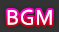
<style>
.page{position:relative;width:59px;height:32px;background:#333333}
.page>*{position:absolute;margin:0}
.t1{font:22px "Corbel";letter-spacing:0.035em;color:#ffffff}
</style>
<div class="page">
<p class="t1" style="left:7px;top:9px;width:45px;height:16px">BGM</p>
</div>
